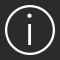
<style>
.page{position:relative;width:60px;height:60px;background:#2b2b2b}
.page>*{position:absolute;margin:0}
.t1{font:45.3px "Avenir-Light";color:#ffffff}
</style>
<div class="page">
<p class="t1" style="left:27px;top:13px;width:5px;height:32px">i</p>
</div>
